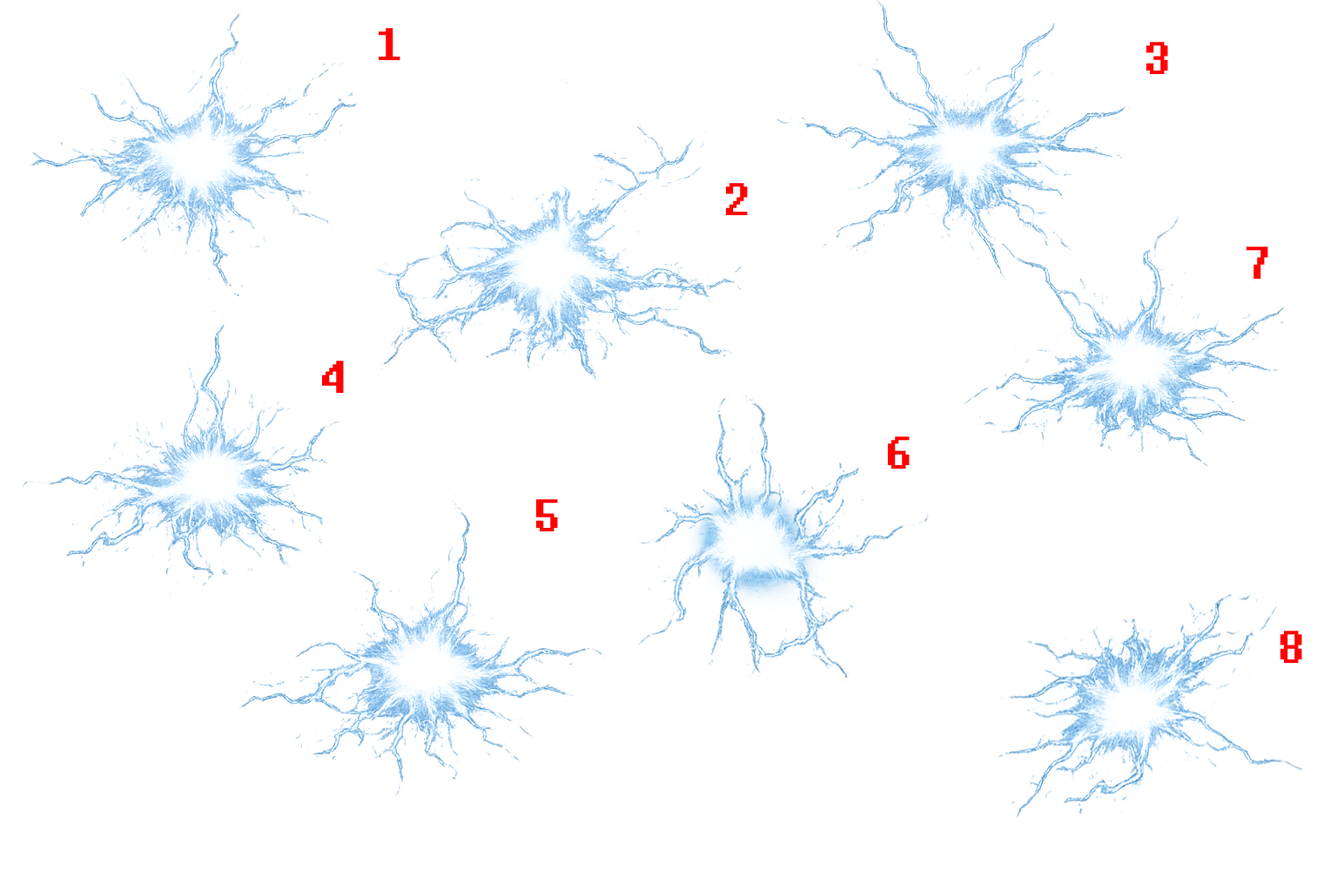
<style>
.page{position:relative;width:1337px;height:892px;background:#ffffff}
.page>*{position:absolute;margin:0}
.t1{font:57px "8bitoperatorJVERUS-Regular";color:#ff0000}
</style>
<div class="page">
<p class="t1" style="left:379px;top:28px;width:22px;height:32px">1</p>
<p class="t1" style="left:1147px;top:42px;width:21px;height:32px">3</p>
<p class="t1" style="left:726px;top:183px;width:22px;height:32px">2</p>
<p class="t1" style="left:1247px;top:246px;width:22px;height:33px">7</p>
<p class="t1" style="left:322px;top:360px;width:22px;height:33px">4</p>
<p class="t1" style="left:888px;top:436px;width:22px;height:32px">6</p>
<p class="t1" style="left:536px;top:499px;width:22px;height:32px">5</p>
<p class="t1" style="left:1281px;top:630px;width:22px;height:33px">8</p>
</div>
